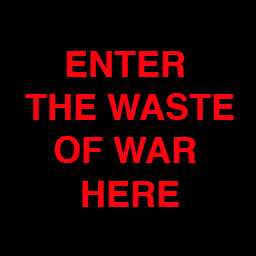
<style>
.page{position:relative;width:256px;height:256px;background:#000000}
.page>*{position:absolute;margin:0}
.t1{font:36px "Helvetica-Bold";color:#fe030f}
</style>
<div class="page">
<p class="t1" style="left:25px;top:51px;width:209px;height:156px;text-align:center">ENTER <br>THE WASTE<br>OF WAR <br>HERE</p>
</div>
